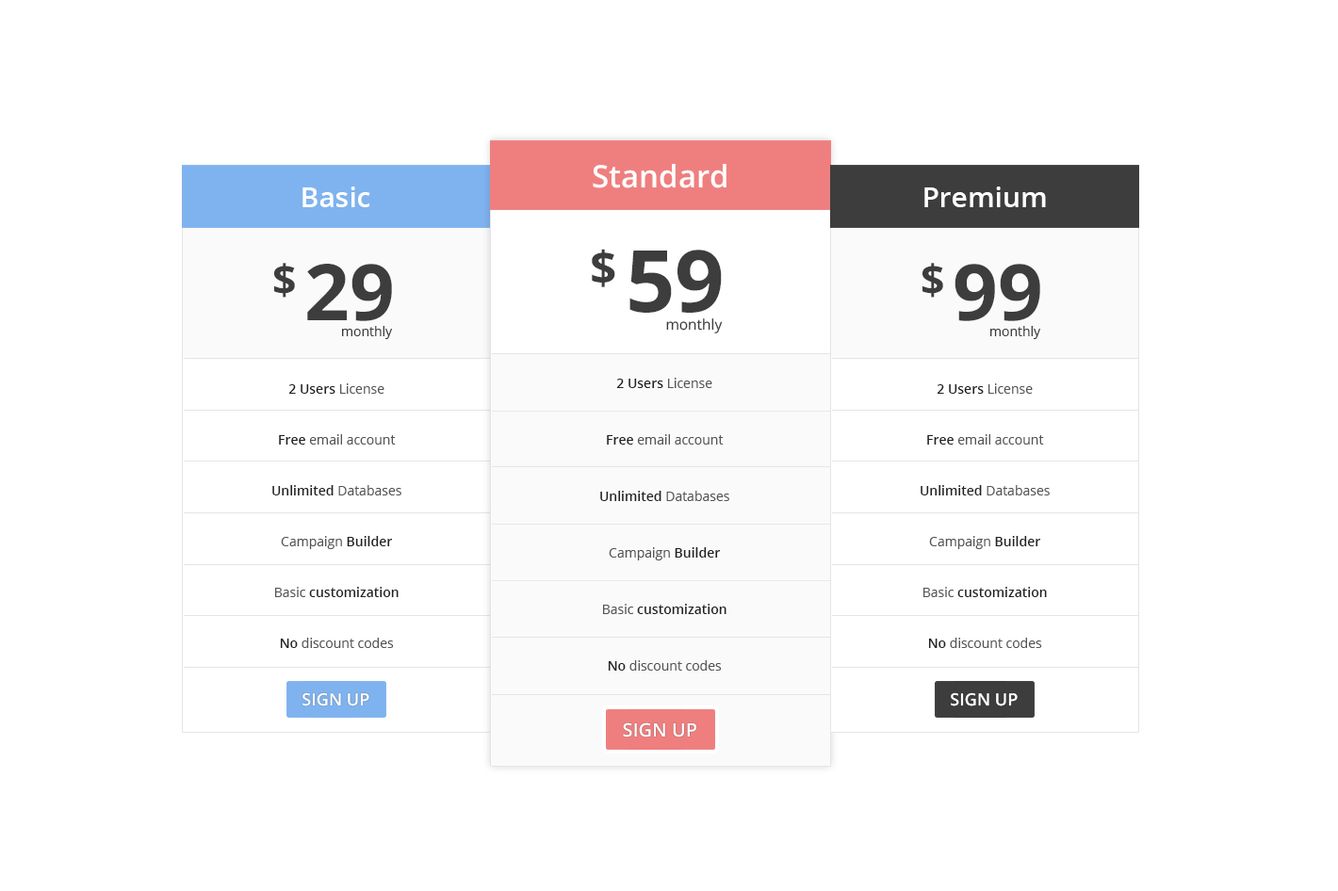
<style>
.page{position:relative;width:1338px;height:891px;background:#ffffff}
.page>*{position:absolute;margin:0}
.t1{font:31.2px "OpenSans-Semibold";color:#fefefe}
.t2{font:28.3px "OpenSans-Semibold";color:#fefefe}
.t3{font:79.2px "OpenSans-Bold";color:#3d3d3d}
.t4{font:85.8px "OpenSans-Bold";color:#3d3d3d}
.t5{font:71.9px "OpenSans-Bold";color:#3d3d3d}
.t6{font:77.9px "OpenSans-Bold";color:#3d3d3d}
.t7{font:13.2px "OpenSans";color:#3d3d3d}
.t8{font:14.5px "OpenSans";color:#3d3d3d}
.t9{font:13.2px/56.5px "OpenSans";color:#555555}
.t10{font:13.2px/56.5px "OpenSans-Semibold";color:#222222}
.t11{font:13.2px/50.9px "OpenSans";color:#555555}
.t12{font:13.2px/50.9px "OpenSans-Semibold";color:#222222}
.t13{font:17px "OpenSans-Semibold";color:#ffffff;text-transform:uppercase}
.t14{font:18.7px "OpenSans-Semibold";color:#ffffff;text-transform:uppercase}
</style>
<div class="page">
<p class="t1" style="left:593px;top:164px;width:133px;height:24px">Standard</p>
<p class="t2" style="left:302px;top:187px;width:68px;height:20px">Basic</p>
<p class="t2" style="left:924px;top:187px;width:122px;height:20px">Premium</p>
<p class="t3" style="left:592px;top:249px;width:23px;height:38px">$</p>
<p class="t4" style="left:629px;top:250px;width:93px;height:63px">59</p>
<p class="t5" style="left:274px;top:263px;width:21px;height:35px">$</p>
<p class="t6" style="left:307px;top:264px;width:85px;height:57px">29</p>
<p class="t5" style="left:922px;top:263px;width:21px;height:35px">$</p>
<p class="t6" style="left:954px;top:264px;width:86px;height:57px">99</p>
<p class="t7" style="left:342px;top:326px;width:51px;height:13px">monthly</p>
<p class="t8" style="left:666px;top:318px;width:57px;height:16px">monthly</p>
<p class="t7" style="left:990px;top:326px;width:51px;height:13px">monthly</p>
<p class="t9" style="left:600px;top:378px;width:129px;height:293px;text-align:center"><span class="t10">2 Users</span> License   <br><span class="t10">Free </span>email account<br><span class="t10">Unlimited </span>Databases <br>Campaign <span class="t10">Builder <br></span>Basic <span class="t10">customization <br>No </span>discount codes</p>
<p class="t11" style="left:272px;top:383px;width:129px;height:265px;text-align:center"><span class="t12">2 Users</span> License   <br><span class="t12">Free </span>email account<br><span class="t12">Unlimited </span>Databases <br>Campaign <span class="t12">Builder <br></span>Basic <span class="t12">customization <br>No </span>discount codes</p>
<p class="t11" style="left:920px;top:383px;width:130px;height:265px;text-align:center"><span class="t12">2 Users</span> License   <br><span class="t12">Free </span>email account<br><span class="t12">Unlimited </span>Databases <br>Campaign <span class="t12">Builder <br></span>Basic <span class="t12">customization <br>No </span>discount codes</p>
<p class="t13" style="left:302px;top:692px;width:67px;height:15px">Sign Up</p>
<p class="t13" style="left:951px;top:692px;width:67px;height:15px">Sign Up</p>
<p class="t14" style="left:623px;top:723px;width:73px;height:15px">Sign Up</p>
</div>
